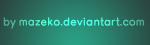
<style>
.page{position:relative;width:150px;height:45px}
.page>*{position:absolute;margin:0}
.t1{font:11px "Young";letter-spacing:0.01em;font-weight:bold}
</style>
<div class="page">
<p class="t1" style="left:3px;top:17px;width:141px;height:12px">by mazeko.deviantart.com</p>
</div>
